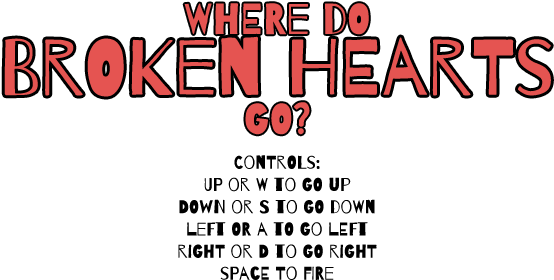
<style>
.page{position:relative;width:554px;height:280px;background:#ffffff}
.page>*{position:absolute;margin:0}
.t1{font:43.4px "Barrio-Regular";color:#e55451}
.t2{font:78.7px "Barrio-Regular";color:#e55451}
.t3{font:18.5px "Barrio-Regular";color:#000000}
</style>
<div class="page">
<p class="t1" style="left:184px;top:3px;width:185px;height:32px">WHERE DO</p>
<p class="t2" style="left:4px;top:36px;width:547px;height:61px">BROKEN HEARTS</p>
<p class="t1" style="left:245px;top:102px;width:65px;height:33px">GO?</p>
<p class="t3" style="left:178px;top:155px;width:199px;height:125px;text-align:center">Controls:<br>UP or W to go up<br>DOWN or S to go down<br>left or A to go left<br>right or d to go right<br>space to fire</p>
</div>
